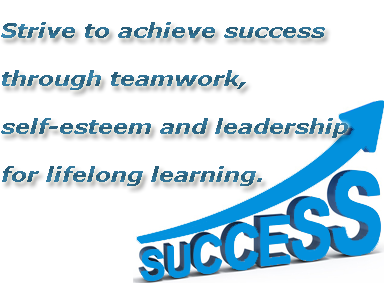
<style>
.page{position:relative;width:384px;height:283px;background:#ffffff}
.page>*{position:absolute;margin:0}
.t1{font:20px "Verdana-BoldItalic";color:#306e8f;scale:1.13 1}
.t2{font:18px "Verdana-BoldItalic";color:#306e8f;scale:1.13 1}
</style>
<div class="page">
<p class="t1" style="left:1px;top:22px;width:347px;height:164px"><span class="t2"><br></span>Strive to achieve success <br><br>through teamwork, <br><br>self-esteem and leadership <br><br>for lifelong learning.</p>
</div>
